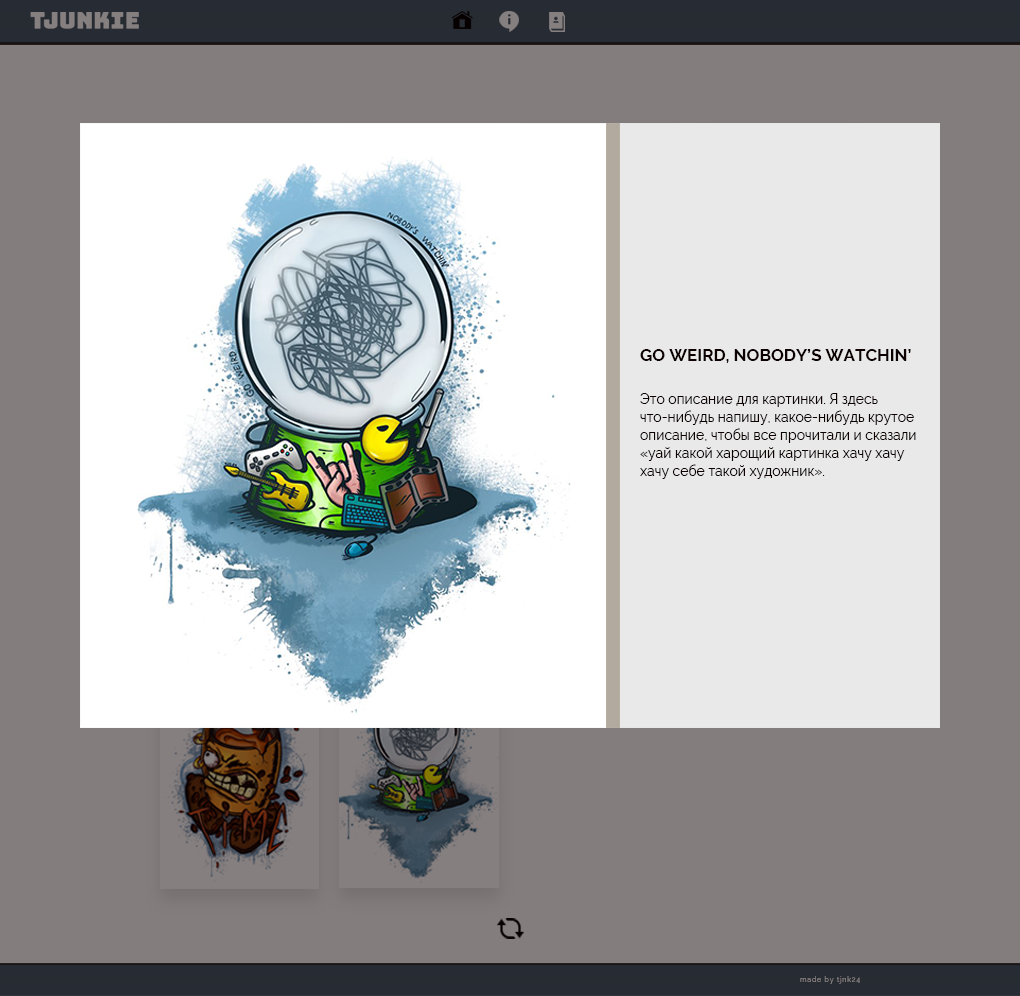
<style>
.page{position:relative;width:1020px;height:996px;background:#837d7d}
.page>*{position:absolute;margin:0}
.t1{font:17px "Raleway-Bold";color:#0d0001}
.t2{font:14px/18px "Raleway-Regular";color:#0d0001}
</style>
<div class="page">
<p class="t1" style="left:640px;top:349px;width:271px;height:14px">GO WEIRD, NOBODY’S WATCHIN’</p>
<p class="t2" style="left:640px;top:393px;width:276px;height:86px">Это описание для картинки. Я здесь что-нибудь напишу, какое-нибудь крутое описание, чтобы все прочитали и сказали «уай какой харощий картинка хачу хачу хачу себе такой художник».</p>
</div>
